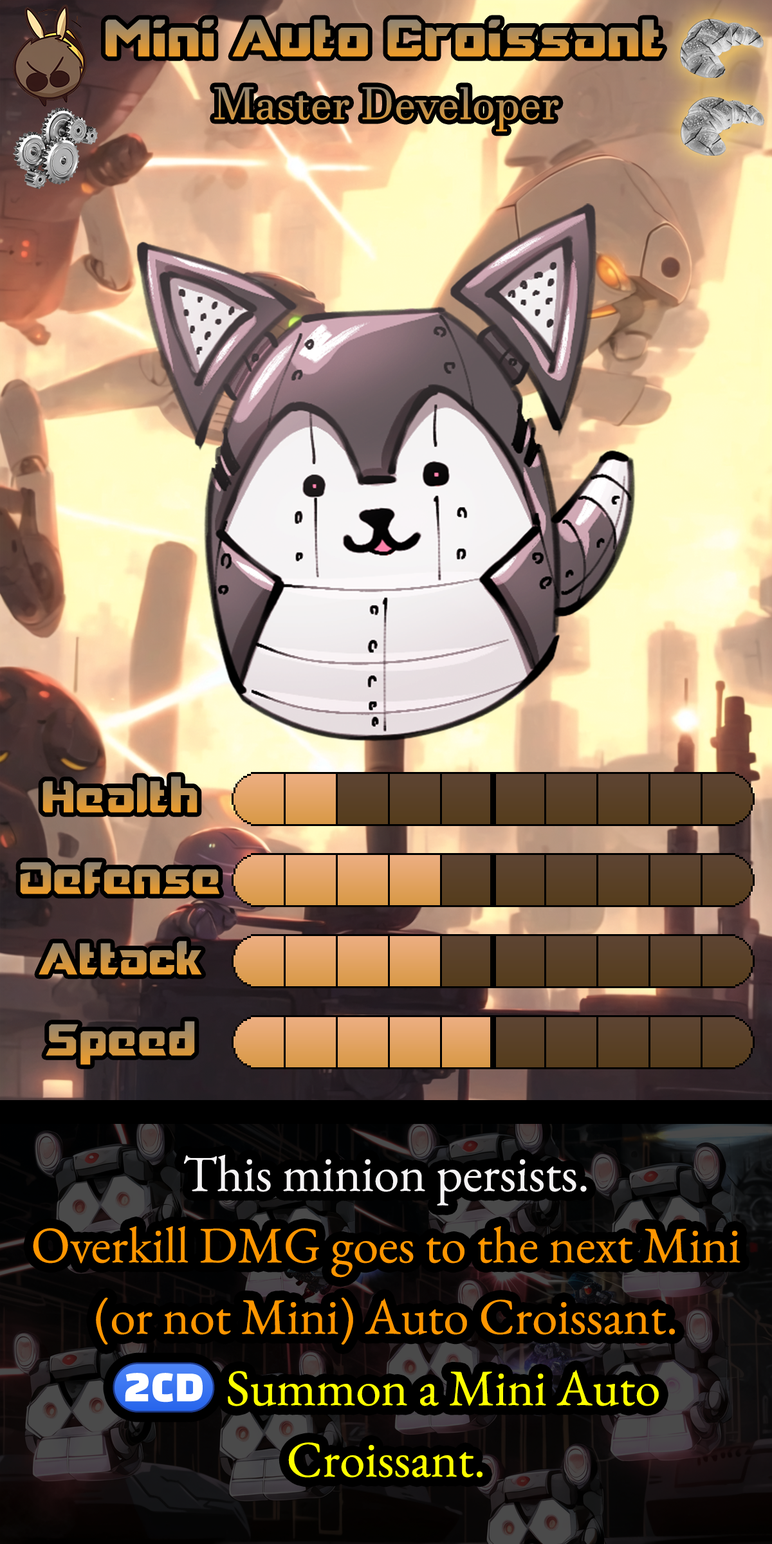
<style>
.page{position:relative;width:772px;height:1544px}
.page>*{position:absolute;margin:0}
.t1{font:90.1px "Mechanismo-Regular"}
.t2{font:76.3px "Mechanismo-Regular"}
.t3{font:77.3px "Mechanismo-Regular"}
.t4{font:87.5px/71.4px "EBGaramond-Regular";color:#ff9600}
.t5{font:87.5px/71.4px "EBGaramond-Regular";color:#f5f3f4}
.t6{font:87.5px/71.4px "stoogedings-Regular";color:#fcff00}
.t7{font:87.5px/71.4px "EBGaramond-Regular";color:#fcff00}
</style>
<div class="page">
<p class="t1" style="left:106px;top:19px;width:557px;height:38px">Mini Auto Croissant</p>
<p class="t2" style="left:42px;top:777px;width:156px;height:36px">Health</p>
<p class="t3" style="left:20px;top:862px;width:200px;height:32px">Defense</p>
<p class="t2" style="left:39px;top:941px;width:163px;height:34px">Attack</p>
<p class="t2" style="left:46px;top:1021px;width:149px;height:44px">Speed</p>
<p class="t4" style="left:33px;top:1155px;width:708px;height:323px;text-align:center"><span class="t5">This minion persists.<br></span>Overkill DMG goes to the next Mini (or not Mini) Auto Croissant.<br><span class="t6">(2CD)</span><span class="t7"> Summon a Mini Auto Croissant.</span></p>
</div>
